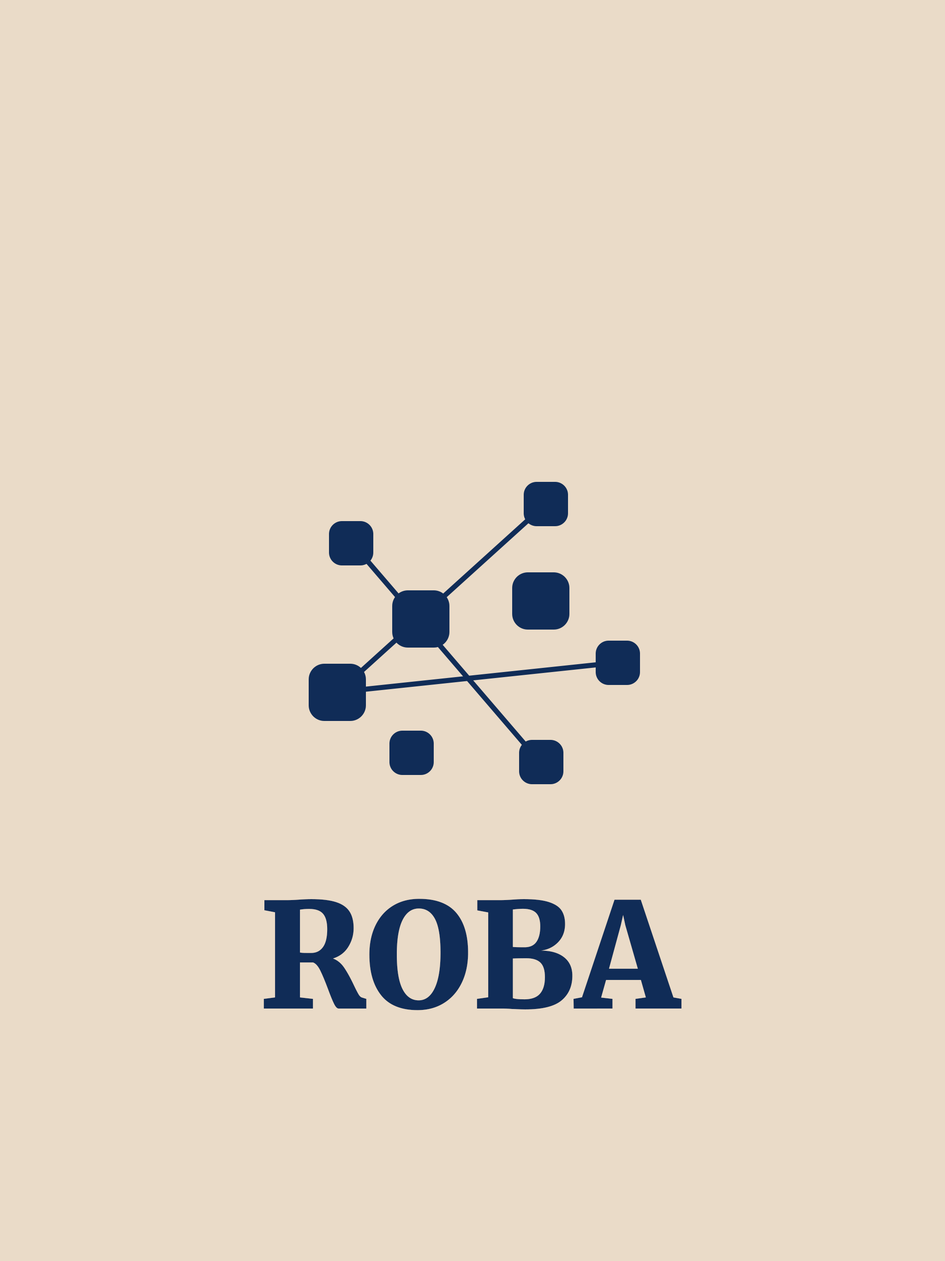
<style>
.page{position:relative;width:945px;height:1261px;background:#eadbc8}
.page>*{position:absolute;margin:0}
.t1{font:145.9px "Merriweather-Black";color:#102c57}
</style>
<div class="page">
<p class="t1" style="left:264px;top:899px;width:418px;height:112px">ROBA</p>
</div>
